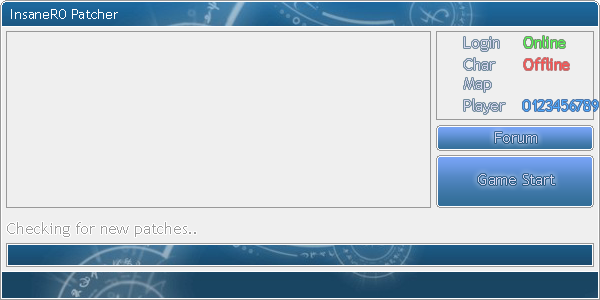
<style>
.page{position:relative;width:600px;height:300px;background:#efefef}
.page>*{position:absolute;margin:0}
.t1{font:16px "TrebuchetMS";color:#d6d7f0}
.t2{font:16px "TrebuchetMS";color:#53ff4f}
.t3{font:16px "TrebuchetMS";color:#ff4f4f}
.t4{font:16px "TrebuchetMS";color:#4faaff}
.t5{font:16px "TrebuchetMS";color:#999999}
</style>
<div class="page">
<p class="t1" style="left:464px;top:37px;width:35px;height:14px">Login</p>
<p class="t2" style="left:524px;top:36px;width:41px;height:12px">Online</p>
<p class="t1" style="left:464px;top:58px;width:31px;height:12px">Char</p>
<p class="t3" style="left:524px;top:58px;width:45px;height:12px">Offline</p>
<p class="t1" style="left:464px;top:78px;width:27px;height:14px">Map</p>
<p class="t1" style="left:464px;top:99px;width:41px;height:15px">Player</p>
<p class="t4" style="left:523px;top:100px;width:75px;height:11px">0123456789</p>
<p class="t1" style="left:495px;top:132px;width:42px;height:11px">Forum</p>
<p class="t1" style="left:478px;top:174px;width:77px;height:11px">Game Start</p>
<p class="t5" style="left:7px;top:222px;width:189px;height:15px">Checking for new patches..</p>
</div>
